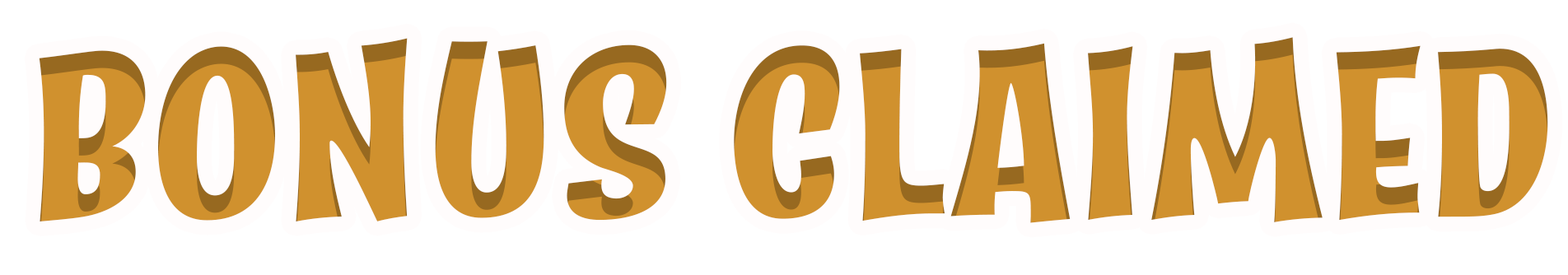
<style>
.page{position:relative;width:1568px;height:275px;background:#ffffff}
.page>*{position:absolute;margin:0}
.t1{font:231.6px "Catseye-Bold";color:#d0912e}
</style>
<div class="page">
<p class="t1" style="left:39px;top:37px;width:1509px;height:186px">BONUS CLAIMED</p>
</div>
